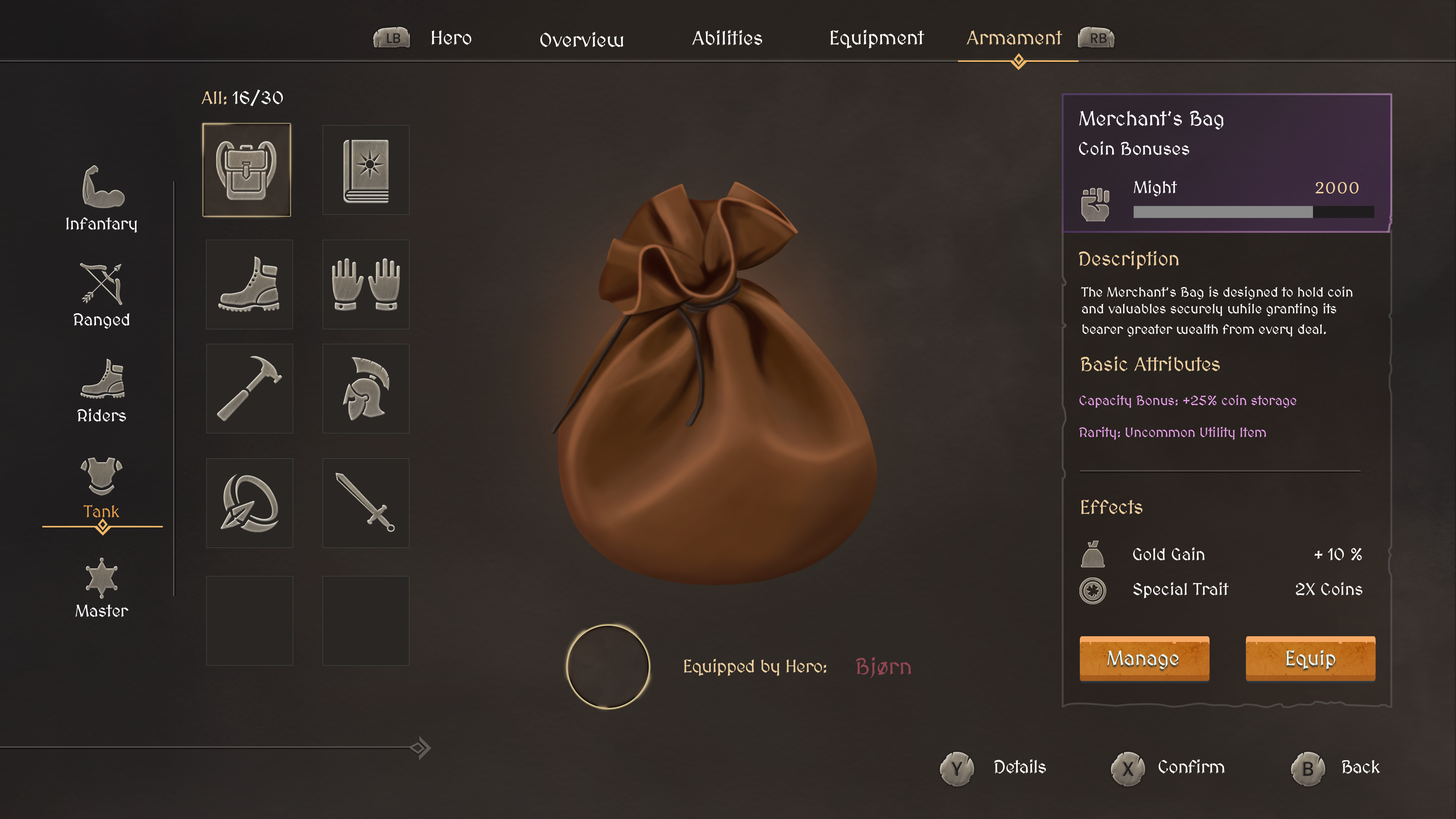
<style>
.page{position:relative;width:1456px;height:819px}
.page>*{position:absolute;margin:0}
.t1{font:19.8px "MedievalSharp";color:#ffffff}
.t2{font:19.8px "MedievalSharp";color:#ecce9f}
.t3{font:18.2px "MedievalSharp";color:#ffffff}
.t4{font:18.2px "MedievalSharp";color:#ecce9f}
.t5{font:20.5px "MedievalSharp";color:#ffffff}
.t6{font:17.1px "MedievalSharp";color:#ffffff}
.t7{font:17.1px "Kurale-Regular";color:#ecce9f}
.t8{font:19.7px "MedievalSharp";color:#ecce9f}
.t9{font:13.6px "MedievalSharp";color:#ffffff}
.t10{font:13.6px "MedievalSharp";color:#e89fe9}
.t11{font:17.1px "MedievalSharp";color:#dd994a}
.t12{font:20.5px "MedievalSharp";color:#e5fbfd}
.t13{font:18.2px "MedievalSharp";letter-spacing:-0.02em;color:#ecce9f}
.t14{font:22.7px "MedievalSharp";color:#924552}
.t15{font:18.2px "MedievalSharp";letter-spacing:-0.02em;color:#ffffff}
</style>
<div class="page">
<p class="t1" style="left:692px;top:30px;width:70px;height:15px">Abilities</p>
<p class="t1" style="left:830px;top:30px;width:94px;height:19px">Equipment</p>
<p class="t1" style="left:431px;top:30px;width:40px;height:15px">Hero</p>
<p class="t1" style="left:540px;top:32px;width:83px;height:15px">Overview</p>
<p class="t2" style="left:966px;top:30px;width:96px;height:15px">Armament</p>
<p class="t3" style="left:201px;top:89px;width:82px;height:17px"><span class="t4">All:</span> 16/30</p>
<p class="t5" style="left:1079px;top:111px;width:145px;height:19px">Merchant’s Bag</p>
<p class="t3" style="left:1079px;top:141px;width:110px;height:14px">Coin Bonuses</p>
<p class="t6" style="left:1134px;top:180px;width:43px;height:16px">Might</p>
<p class="t7" style="left:1315px;top:182px;width:44px;height:12px">2000</p>
<p class="t6" style="left:66px;top:217px;width:71px;height:16px">Infantary</p>
<p class="t8" style="left:1079px;top:251px;width:100px;height:19px">Description</p>
<p class="t9" style="left:1081px;top:286px;width:271px;height:51px">The Merchant’s Bag is designed to hold coin and valuables securely while granting its bearer greater wealth from every deal.</p>
<p class="t6" style="left:74px;top:313px;width:55px;height:16px">Ranged</p>
<p class="t8" style="left:1081px;top:356px;width:139px;height:15px">Basic Attributes</p>
<p class="t10" style="left:1079px;top:395px;width:217px;height:13px">Capacity Bonus: +25% coin storage</p>
<p class="t6" style="left:77px;top:408px;width:49px;height:14px">Riders</p>
<p class="t10" style="left:1079px;top:427px;width:187px;height:13px">Rarity: Uncommon Utility Item</p>
<p class="t11" style="left:83px;top:505px;width:36px;height:13px">Tank</p>
<p class="t8" style="left:1081px;top:500px;width:61px;height:14px">Effects</p>
<p class="t6" style="left:1133px;top:547px;width:72px;height:13px">Gold Gain</p>
<p class="t6" style="left:1314px;top:548px;width:48px;height:12px">+ 10 %</p>
<p class="t6" style="left:1133px;top:582px;width:96px;height:16px">Special Trait</p>
<p class="t6" style="left:1296px;top:582px;width:66px;height:13px">2X Coins</p>
<p class="t6" style="left:75px;top:604px;width:54px;height:13px">Master</p>
<p class="t12" style="left:1107px;top:650px;width:71px;height:19px">Manage</p>
<p class="t12" style="left:1286px;top:650px;width:49px;height:19px">Equip</p>
<p class="t13" style="left:684px;top:659px;width:142px;height:17px">Equipped by Hero:</p>
<p class="t14" style="left:856px;top:657px;width:55px;height:22px">Bjørn</p>
<p class="t15" style="left:994px;top:759px;width:52px;height:14px">Details</p>
<p class="t15" style="left:1158px;top:759px;width:67px;height:14px">Confirm</p>
<p class="t15" style="left:1342px;top:760px;width:38px;height:13px">Back</p>
</div>
